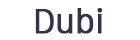
<style>
.page{position:relative;width:140px;height:40px;background:#ffffff}
.page>*{position:absolute;margin:0}
.t1{font:36px "SanFranciscoDisplay-Regular";color:#36324a;font-weight:bold;scale:0.95 1}
</style>
<div class="page">
<p class="t1" style="left:35px;top:8px;width:67px;height:26px">Dubi</p>
</div>
